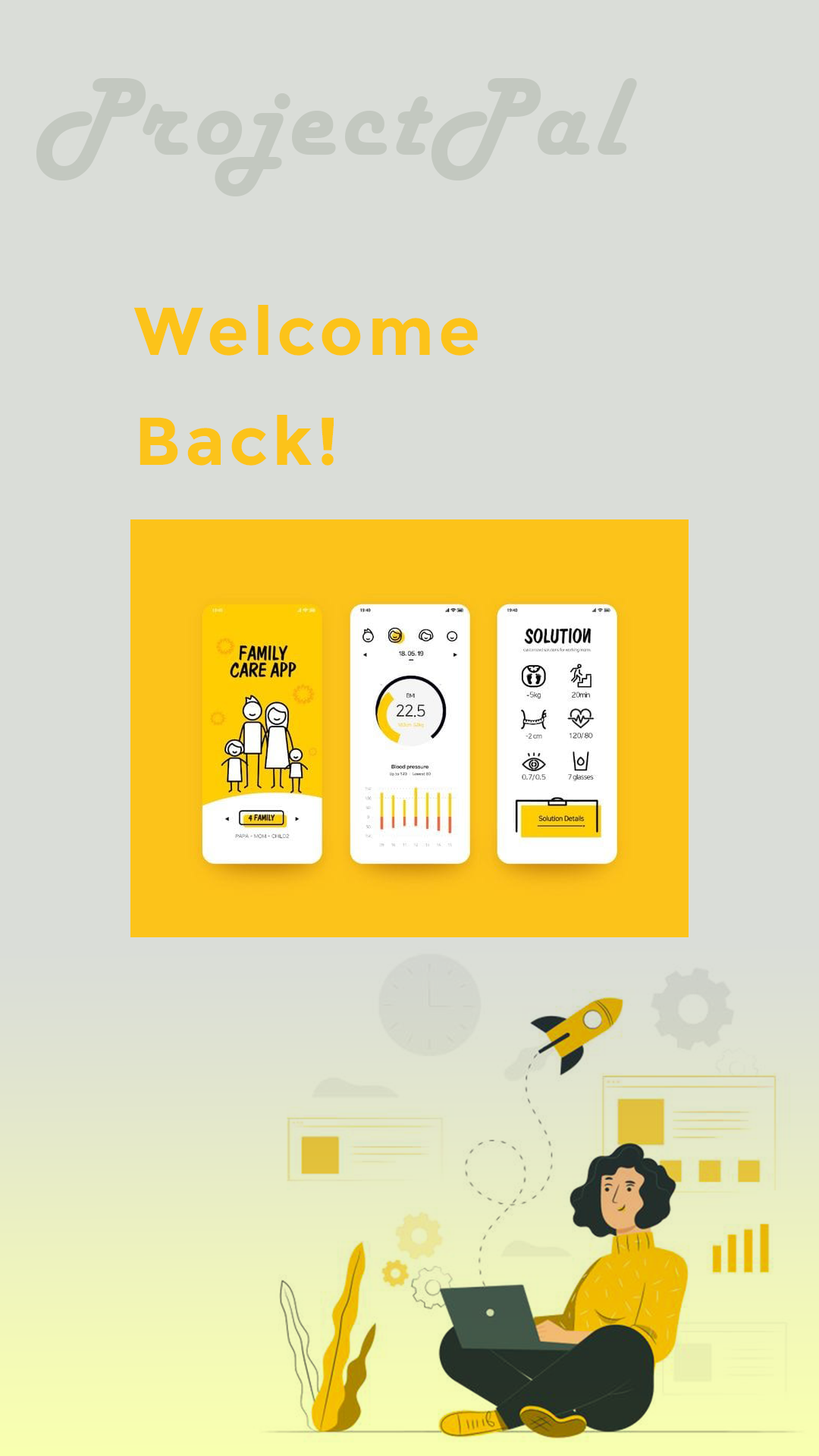
<style>
.page{position:relative;width:819px;height:1456px;background:#daddd8}
.page>*{position:absolute;margin:0}
.t1{font:115.2px "HarlowSolid";letter-spacing:0.06em;color:#c3c8c0}
.t2{font:115.2px "HarlowSolid";letter-spacing:0.06em;color:#c3c8c0;text-transform:uppercase}
.t3{font:67.6px/109.8px "Montserrat-Bold";letter-spacing:0.06em;color:#fcc31a}
</style>
<div class="page">
<p class="t1" style="left:36px;top:78px;width:601px;height:118px"><span class="t2">P</span>rojectPal</p>
<p class="t3" style="left:133px;top:305px;width:345px;height:161px">Welcome <br>Back!</p>
</div>
